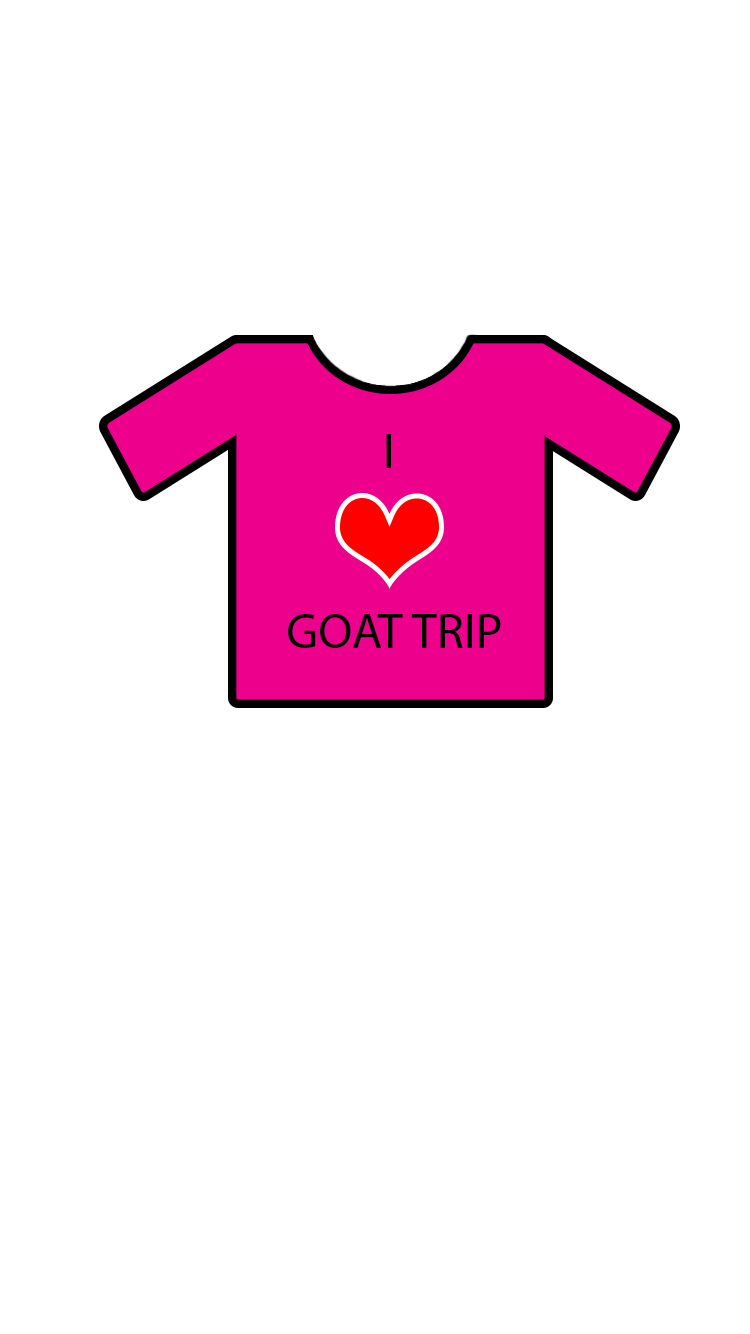
<style>
.page{position:relative;width:750px;height:1334px;background:#ffffff}
.page>*{position:absolute;margin:0}
.t1{font:50px "MyriadPro-Regular";color:#000000}
</style>
<div class="page">
<p class="t1" style="left:288px;top:434px;width:213px;height:214px;text-align:center">I <br><br><br>GOAT TRIP</p>
</div>
